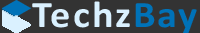
<style>
.page{position:relative;width:200px;height:33px;background:#333333}
.page>*{position:absolute;margin:0}
.t1{font:37.4px "Calibri-Bold";letter-spacing:0.05em;color:#daf1ff;scale:1.08 1}
.t2{font:37.4px "Calibri-Bold";letter-spacing:0.05em;color:#0072b8;scale:1.08 1}
</style>
<div class="page">
<p class="t1" style="left:32px;top:1px;width:98px;height:27px">Techz</p>
<p class="t2" style="left:135px;top:3px;width:62px;height:31px">Bay</p>
</div>
